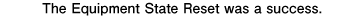
<style>
.page{position:relative;width:364px;height:17px;background:#ffffff}
.page>*{position:absolute;margin:0}
.t1{font:14px "FutoGoB101Pr5-Bold";color:#000000}
</style>
<div class="page">
<p class="t1" style="left:42px;top:2px;width:280px;height:14px">The Equipment State Reset was a success.</p>
</div>
